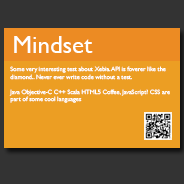
<style>
.page{position:relative;width:184px;height:184px;background:#ec9e23}
.page>*{position:absolute;margin:0}
.t1{font:25px "GillSans";color:#ffffff}
.t2{font:6.2px "GillSans";color:#ffffff}
</style>
<div class="page">
<p class="t1" style="left:14px;top:36px;width:79px;height:17px">Mindset</p>
<p class="t2" style="left:9px;top:66px;width:161px;height:37px">Some very interesting test about Xebia. API is foverer like the<br>diamond.. Never ever write code without a test.<br><br>Java Objective-C C++ Scala HTML5 Coffee, JavaScript? CSS are <br>part of some cool languages</p>
</div>
